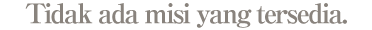
<style>
.page{position:relative;width:372px;height:30px;background:#ffffff}
.page>*{position:absolute;margin:0}
.t1{font:27px "RyuminPro-ExBold";letter-spacing:-0.08em;color:#89837d}
</style>
<div class="page">
<p class="t1" style="left:25px;top:3px;width:322px;height:25px">Tidak ada misi yang tersedia.</p>
</div>
